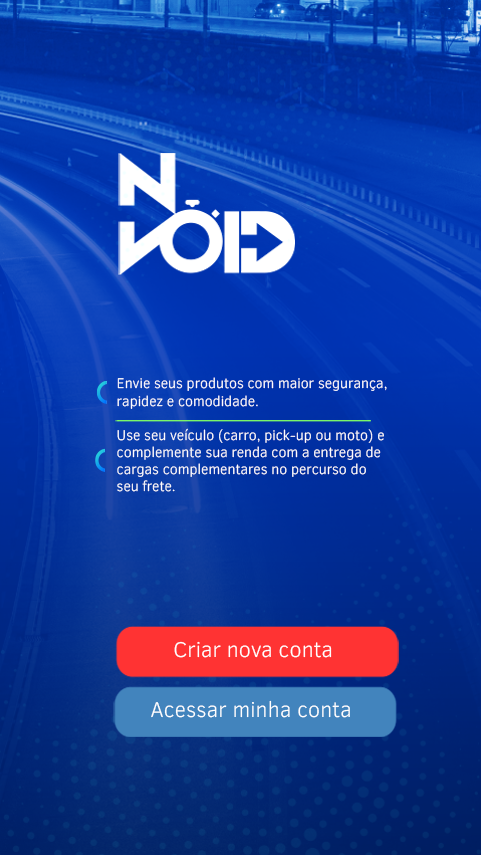
<style>
.page{position:relative;width:481px;height:855px}
.page>*{position:absolute;margin:0}
.t1{font:14.3px "ClearSans-Light";color:#ffffff}
.t2{font:21.9px "ClearSans-Light";color:#ffffff}
</style>
<div class="page">
<p class="t1" style="left:117px;top:377px;width:270px;height:115px">Envie seus produtos com maior segurança, rapidez e comodidade.<br><br>Use seu veículo (carro, pick-up ou moto) e complemente sua renda com a entrega de cargas complementares no percurso do seu frete.</p>
<p class="t2" style="left:174px;top:641px;width:158px;height:17px">Criar nova conta</p>
<p class="t2" style="left:151px;top:700px;width:199px;height:18px">Acessar minha conta</p>
</div>
